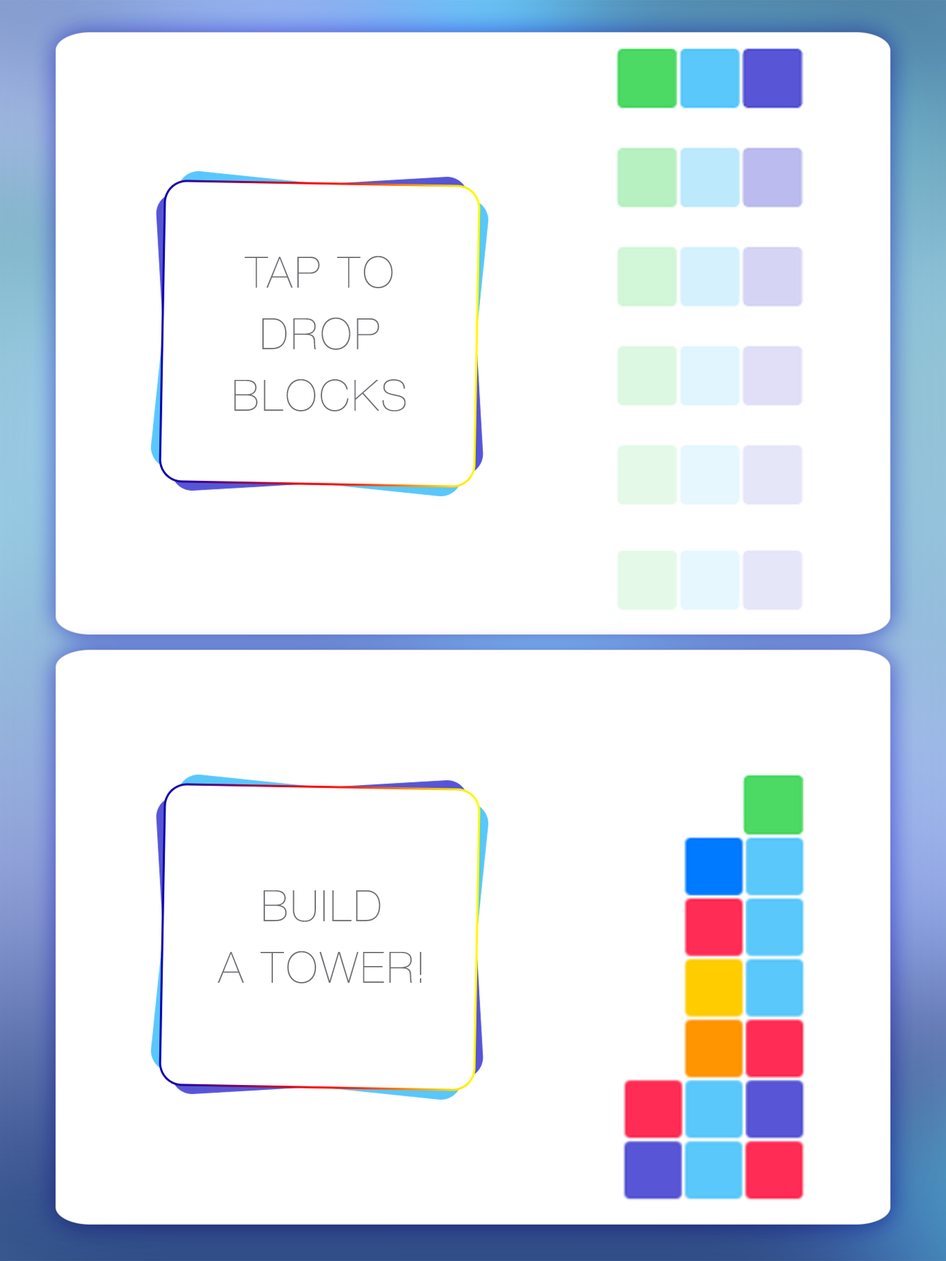
<style>
.page{position:relative;width:946px;height:1261px;background:#ffffff}
.page>*{position:absolute;margin:0}
.t1{font:42.8px/61.6px "HelveticaNeueCyr-UltraLight";letter-spacing:0.05em;color:#727277;text-transform:uppercase;font-weight:bold}
</style>
<div class="page">
<p class="t1" style="left:234px;top:256px;width:172px;height:156px;text-align:center">tap to<br>drop<br>blocks</p>
<p class="t1" style="left:217px;top:890px;width:204px;height:94px;text-align:center">build<br>a tower!</p>
</div>
